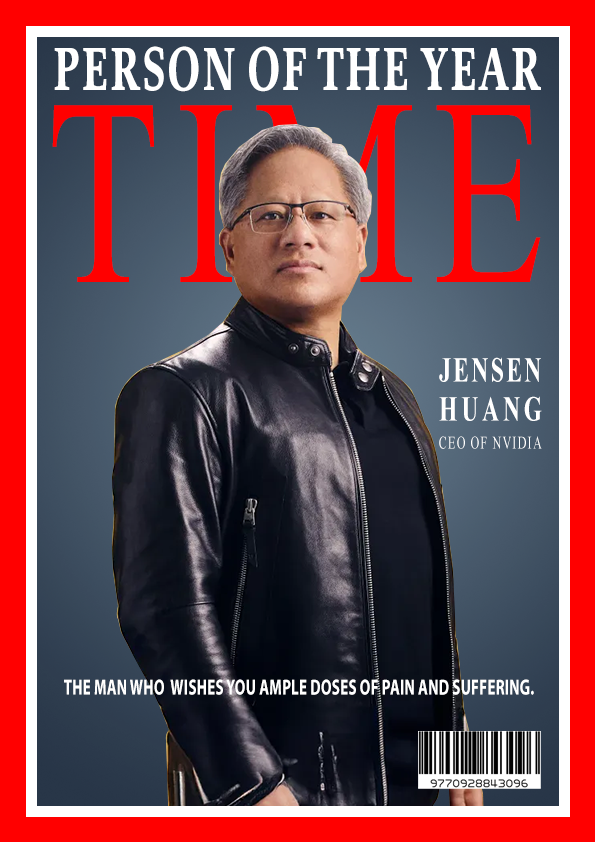
<style>
.page{position:relative;width:595px;height:842px}
.page>*{position:absolute;margin:0}
.t1{font:64.4px "Proforma-Bold";letter-spacing:0.02em;color:#ffffff;text-transform:uppercase;scale:0.68 1}
.t2{font:64.4px "Proforma-Bold";letter-spacing:0.02em;color:#ffffff;scale:0.68 1}
.t3{font:266.2px "TimesNewRomanPSMT";letter-spacing:0.06em;color:#ff0000;text-transform:uppercase;scale:0.68 1}
.t4{font:17.4px/28px "TimesNewRomanPSMT";letter-spacing:0.08em;color:#ffffff;text-transform:uppercase;scale:0.68 1}
.t5{font:34.8px/39px "TimesNewRomanPS-BoldMT";letter-spacing:0.06em;color:#ffffff;text-transform:uppercase;scale:0.68 1}
.t6{font:34.8px/39px "TimesNewRomanPS-BoldMT";letter-spacing:0.12em;color:#ffffff;text-transform:uppercase;scale:0.68 1}
.t7{font:21.8px "MyriadPro-Bold";color:#ffffff;text-transform:uppercase;scale:0.68 1}
</style>
<div class="page">
<p class="t1" style="left:54px;top:46px;width:487px;height:46px">PERSON <span class="t2">OF THE</span> YEAR</p>
<p class="t3" style="left:52px;top:105px;width:489px;height:177px">time</p>
<p class="t4" style="left:439px;top:357px;width:103px;height:92px"><span class="t5">Jensen <br></span><span class="t6">Huang<br></span>CEO of NVIDIA</p>
<p class="t7" style="left:64px;top:679px;width:470px;height:16px">THE MAN WHO  wishES you ample doses of pain and suffering.</p>
</div>
